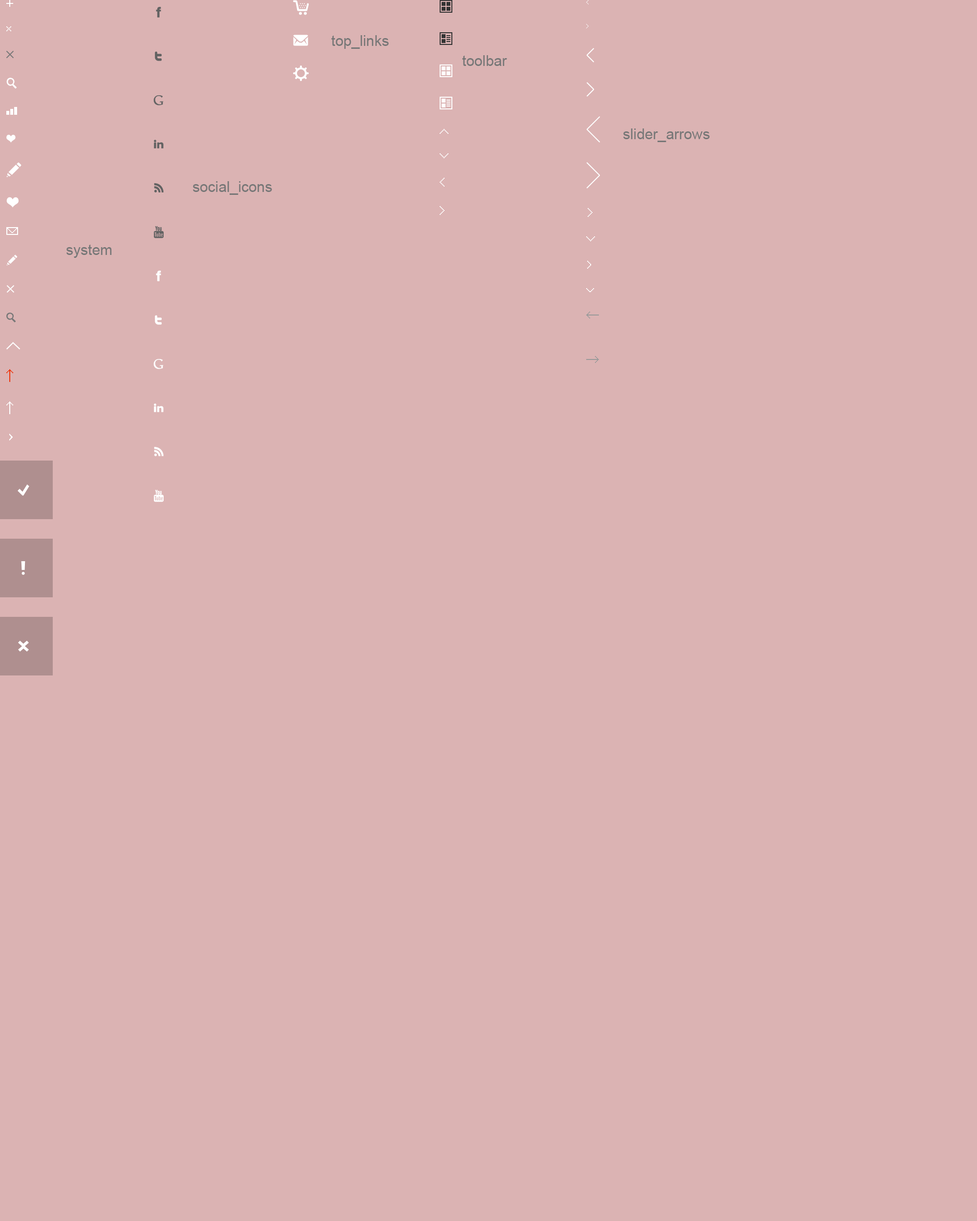
<style>
.page{position:relative;width:977px;height:1221px;background:#dbb3b3}
.page>*{position:absolute;margin:0}
.t1{font:14.7px "ArialMT";color:#777777}
</style>
<div class="page">
<p class="t1" style="left:331px;top:35px;width:58px;height:14px">top_links</p>
<p class="t1" style="left:462px;top:55px;width:45px;height:11px">toolbar</p>
<p class="t1" style="left:623px;top:128px;width:87px;height:14px">slider_arrows</p>
<p class="t1" style="left:193px;top:181px;width:79px;height:14px">social_icons</p>
<p class="t1" style="left:66px;top:244px;width:46px;height:14px">system</p>
</div>
